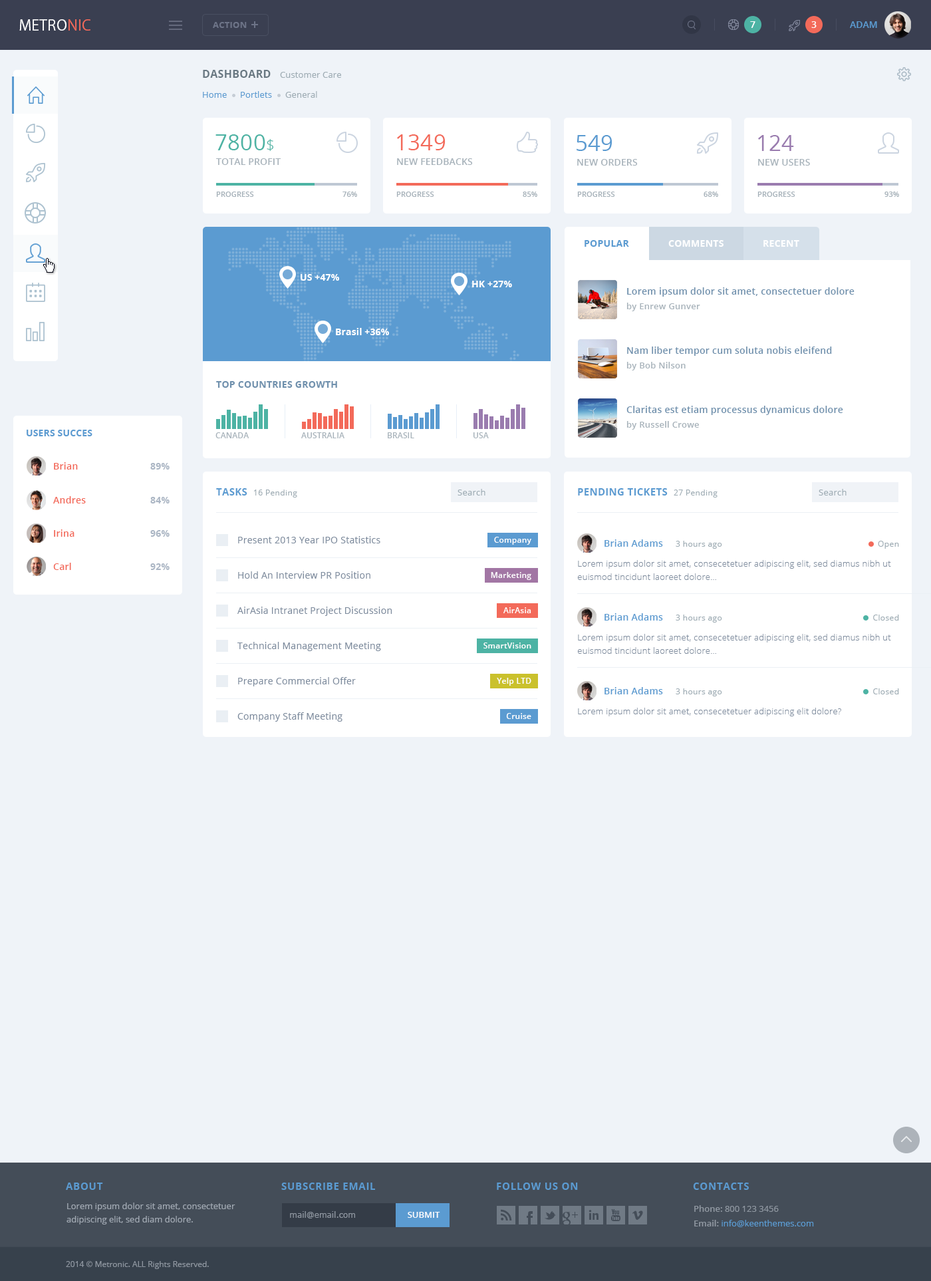
<style>
.page{position:relative;width:931px;height:1281px;background:#eff3f8}
.page>*{position:absolute;margin:0}
.t1{font:14.6px "KozGoPro-Regular";letter-spacing:0.02em;color:#ffffff}
.t2{font:14.6px "KozGoPro-Regular";letter-spacing:0.02em;color:#f36a5a}
.t3{font:8.6px "OpenSans-Bold";letter-spacing:0.02em;color:#6d7488}
.t4{font:9.3px "OpenSans-Semibold";letter-spacing:0.01em;color:#ffffff}
.t5{font:9.3px "OpenSans-Semibold";color:#5b9bd1}
.t6{font:10.6px "OpenSans-Bold";letter-spacing:0.02em;color:#697882}
.t7{font:8.6px "OpenSans";letter-spacing:0.01em;color:#9eacb4}
.t8{font:8.6px "OpenSans";letter-spacing:0.01em;color:#5b9bd1}
.t9{font:21.9px "OpenSans";letter-spacing:0.01em;color:#4db3a4}
.t10{font:15.3px "OpenSans-Light";letter-spacing:0.01em;color:#4db3a4}
.t11{font:21.9px "OpenSans";letter-spacing:0.01em;color:#f36a5a}
.t12{font:21.9px "OpenSans";letter-spacing:0.01em;color:#5b9bd1}
.t13{font:21.9px "OpenSans";letter-spacing:0.01em;color:#9a7caf}
.t14{font:9.3px "OpenSans-Semibold";letter-spacing:0.01em;color:#a8b3bb}
.t15{font:7.3px "OpenSans-Semibold";letter-spacing:0.01em;color:#a8b3bb}
.t16{font:9.3px "OpenSans-Bold";letter-spacing:0.02em;color:#5b9bd1}
.t17{font:9.3px "OpenSans-Bold";letter-spacing:0.02em;color:#ffffff}
.t18{font:9.3px "OpenSans-Bold";letter-spacing:0.01em;color:#ffffff}
.t19{font:9.3px "OpenSans-Semibold";letter-spacing:0.02em;color:#6f90ad}
.t20{font:8.6px "OpenSans-Semibold";letter-spacing:0.02em;color:#a8b3bb}
.t21{font:9.3px "OpenSans-Bold";letter-spacing:0.02em;color:#6f90ad}
.t22{font:9.3px "OpenSans-Bold";letter-spacing:0.01em;color:#5b9bd1}
.t23{font:8px "OpenSans-Semibold";letter-spacing:0.01em;color:#a8b3bb}
.t24{font:9.3px "OpenSans-Semibold";letter-spacing:0.02em;color:#f36a5a}
.t25{font:9.3px "OpenSans-Bold";letter-spacing:0.02em;color:#abb6c4}
.t26{font:10px "OpenSans-Bold";letter-spacing:0.02em;color:#5b9bd1}
.t27{font:8px "OpenSans";letter-spacing:0.03em;color:#9eacb4}
.t28{font:8.6px "OpenSans";letter-spacing:0.02em;color:#9eacb4}
.t29{font:9.3px "OpenSans";letter-spacing:0.02em;color:#7e8c9e}
.t30{font:8px "OpenSans-Semibold";letter-spacing:0.02em;color:#ffffff}
.t31{font:9.3px "OpenSans-Semibold";letter-spacing:0.02em;color:#5b9bd1}
.t32{font:8.6px/13.3px "OpenSans-Light";letter-spacing:0.02em;color:#7e8c9e}
.t33{font:8.6px "OpenSans-Light";letter-spacing:0.02em;color:#7e8c9e}
.t34{font:10px "OpenSans-Bold";letter-spacing:0.05em;color:#5b9bd1}
.t35{font:8.6px/13.3px "OpenSans";color:#a1a9b3}
.t36{font:8.6px/14.6px "OpenSans";color:#5b9bd1}
.t37{font:8.6px/14.6px "OpenSans-Semibold";color:#8f97a1}
.t38{font:8.6px/14.6px "OpenSans";color:#8f97a1}
.t39{font:8px "Verdana";color:#8f97a1}
.t40{font:8.6px "OpenSans-Semibold";color:#fefefe}
.t41{font:8px "OpenSans";color:#8f97a1}
</style>
<div class="page">
<p class="t1" style="left:19px;top:19px;width:71px;height:12px">METRO<span class="t2">NIC</span></p>
<p class="t3" style="left:213px;top:22px;width:34px;height:6px">ACTION</p>
<p class="t4" style="left:750px;top:21px;width:5px;height:7px">7</p>
<p class="t4" style="left:811px;top:21px;width:6px;height:7px">3</p>
<p class="t5" style="left:850px;top:21px;width:27px;height:7px">ADAM</p>
<p class="t6" style="left:203px;top:70px;width:68px;height:8px">DASHBOARD</p>
<p class="t7" style="left:280px;top:72px;width:61px;height:6px">Customer Care</p>
<p class="t8" style="left:203px;top:92px;width:24px;height:6px">Home</p>
<p class="t8" style="left:241px;top:91px;width:31px;height:7px">Portlets</p>
<p class="t7" style="left:285px;top:91px;width:32px;height:7px">General</p>
<p class="t9" style="left:215px;top:134px;width:58px;height:17px">7800<span class="t10">$</span></p>
<p class="t11" style="left:397px;top:134px;width:49px;height:16px">1349</p>
<p class="t12" style="left:577px;top:135px;width:35px;height:16px">549</p>
<p class="t13" style="left:758px;top:135px;width:36px;height:16px">124</p>
<p class="t14" style="left:216px;top:158px;width:65px;height:7px">TOTAL PROFIT</p>
<p class="t14" style="left:397px;top:158px;width:76px;height:7px">NEW FEEDBACKS</p>
<p class="t14" style="left:577px;top:159px;width:61px;height:7px">NEW ORDERS</p>
<p class="t14" style="left:758px;top:159px;width:52px;height:7px">NEW USERS</p>
<p class="t15" style="left:216px;top:192px;width:38px;height:5px">PROGRESS</p>
<p class="t15" style="left:342px;top:192px;width:15px;height:5px">76%</p>
<p class="t15" style="left:396px;top:192px;width:38px;height:5px">PROGRESS</p>
<p class="t15" style="left:523px;top:192px;width:14px;height:5px">85%</p>
<p class="t15" style="left:577px;top:192px;width:38px;height:5px">PROGRESS</p>
<p class="t15" style="left:704px;top:192px;width:14px;height:5px">68%</p>
<p class="t15" style="left:757px;top:192px;width:38px;height:5px">PROGRESS</p>
<p class="t15" style="left:884px;top:192px;width:15px;height:5px">93%</p>
<p class="t16" style="left:585px;top:240px;width:44px;height:7px">POPULAR</p>
<p class="t17" style="left:668px;top:240px;width:56px;height:7px">COMMENTS</p>
<p class="t17" style="left:763px;top:240px;width:36px;height:7px">RECENT</p>
<p class="t18" style="left:301px;top:274px;width:38px;height:7px">US +47%</p>
<p class="t18" style="left:472px;top:281px;width:40px;height:6px">HK +27%</p>
<p class="t19" style="left:627px;top:287px;width:228px;height:10px">Lorem ipsum dolor sit amet, consectetuer dolore</p>
<p class="t20" style="left:626px;top:303px;width:74px;height:8px">by Enrew Gunver</p>
<p class="t18" style="left:336px;top:328px;width:53px;height:7px">Brasil +36%</p>
<p class="t19" style="left:627px;top:346px;width:205px;height:10px">Nam liber tempor cum soluta nobis eleifend</p>
<p class="t20" style="left:626px;top:362px;width:60px;height:8px">by Bob Nilson</p>
<p class="t21" style="left:216px;top:381px;width:121px;height:7px">TOP COUNTRIES GROWTH</p>
<p class="t19" style="left:626px;top:406px;width:217px;height:9px">Claritas est etiam processus dynamicus dolore</p>
<p class="t20" style="left:626px;top:421px;width:73px;height:9px">by Russell Crowe</p>
<p class="t22" style="left:27px;top:430px;width:65px;height:6px">USERS SUCCES</p>
<p class="t23" style="left:215px;top:432px;width:34px;height:6px">CANADA</p>
<p class="t23" style="left:301px;top:432px;width:43px;height:6px">AUSTRALIA</p>
<p class="t23" style="left:388px;top:432px;width:26px;height:6px">BRASIL</p>
<p class="t23" style="left:473px;top:432px;width:16px;height:6px">USA</p>
<p class="t24" style="left:54px;top:462px;width:24px;height:7px">Brian</p>
<p class="t25" style="left:150px;top:463px;width:20px;height:6px">89%</p>
<p class="t24" style="left:53px;top:496px;width:33px;height:7px">Andres</p>
<p class="t25" style="left:150px;top:497px;width:20px;height:6px">84%</p>
<p class="t26" style="left:216px;top:488px;width:31px;height:7px">TASKS</p>
<p class="t27" style="left:254px;top:489px;width:43px;height:8px">16 Pending</p>
<p class="t28" style="left:458px;top:489px;width:27px;height:6px">Search</p>
<p class="t26" style="left:578px;top:488px;width:90px;height:7px">PENDING TICKETS</p>
<p class="t27" style="left:674px;top:489px;width:44px;height:8px">27 Pending</p>
<p class="t28" style="left:819px;top:489px;width:28px;height:6px">Search</p>
<p class="t24" style="left:54px;top:529px;width:20px;height:8px">Irina</p>
<p class="t25" style="left:150px;top:530px;width:20px;height:7px">96%</p>
<p class="t29" style="left:238px;top:536px;width:142px;height:7px">Present 2013 Year IPO Statistics</p>
<p class="t30" style="left:494px;top:537px;width:37px;height:8px">Company</p>
<p class="t31" style="left:604px;top:539px;width:59px;height:8px">Brian Adams</p>
<p class="t27" style="left:676px;top:541px;width:46px;height:8px">3 hours ago</p>
<p class="t27" style="left:878px;top:541px;width:21px;height:8px">Open</p>
<p class="t24" style="left:53px;top:563px;width:18px;height:7px">Carl</p>
<p class="t25" style="left:150px;top:563px;width:20px;height:7px">92%</p>
<p class="t32" style="left:577px;top:560px;width:314px;height:20px">Lorem ipsum dolor sit amet, consecetetuer adipiscing elit, sed diamus nibh ut <br>euismod tincidunt laoreet dolore...</p>
<p class="t29" style="left:238px;top:571px;width:132px;height:8px">Hold An Interview PR Position</p>
<p class="t30" style="left:491px;top:572px;width:40px;height:8px">Marketing</p>
<p class="t29" style="left:237px;top:606px;width:155px;height:10px">AirAsia Intranet Project Discussion</p>
<p class="t30" style="left:503px;top:607px;width:28px;height:6px">AirAsia</p>
<p class="t31" style="left:604px;top:613px;width:59px;height:7px">Brian Adams</p>
<p class="t27" style="left:676px;top:614px;width:46px;height:8px">3 hours ago</p>
<p class="t27" style="left:873px;top:614px;width:26px;height:6px">Closed</p>
<p class="t29" style="left:237px;top:642px;width:144px;height:9px">Technical Management Meeting</p>
<p class="t32" style="left:577px;top:634px;width:314px;height:20px">Lorem ipsum dolor sit amet, consecetetuer adipiscing elit, sed diamus nibh ut <br>euismod tincidunt laoreet dolore...</p>
<p class="t30" style="left:483px;top:642px;width:48px;height:6px">SmartVision</p>
<p class="t29" style="left:238px;top:677px;width:118px;height:9px">Prepare Commercial Offer</p>
<p class="t30" style="left:497px;top:678px;width:34px;height:8px">Yelp LTD</p>
<p class="t31" style="left:604px;top:687px;width:59px;height:7px">Brian Adams</p>
<p class="t27" style="left:676px;top:688px;width:46px;height:8px">3 hours ago</p>
<p class="t27" style="left:873px;top:688px;width:26px;height:6px">Closed</p>
<p class="t29" style="left:237px;top:712px;width:105px;height:10px">Company Staff Meeting</p>
<p class="t30" style="left:506px;top:713px;width:25px;height:6px">Cruise</p>
<p class="t33" style="left:578px;top:708px;width:263px;height:8px">Lorem ipsum dolor sit amet, consecetetuer adipiscing elit dolore?</p>
<p class="t34" style="left:66px;top:1182px;width:37px;height:8px">ABOUT</p>
<p class="t34" style="left:281px;top:1182px;width:94px;height:8px">SUBSCRIBE EMAIL</p>
<p class="t34" style="left:497px;top:1182px;width:81px;height:8px">FOLLOW US ON</p>
<p class="t34" style="left:693px;top:1182px;width:56px;height:8px">CONTACTS</p>
<p class="t35" style="left:67px;top:1202px;width:168px;height:22px">Lorem ipsum dolor sit amet, consectetuer <br>adipiscing elit, sed diam dolore.</p>
<p class="t36" style="left:694px;top:1205px;width:120px;height:22px"><span class="t37">Phone: </span><span class="t38">800 123 3456<br></span><span class="t37">Email: </span>info@keenthemes.com</p>
<p class="t39" style="left:290px;top:1211px;width:65px;height:7px">mail@email.com</p>
<p class="t40" style="left:408px;top:1212px;width:32px;height:6px">SUBMIT</p>
<p class="t41" style="left:66px;top:1261px;width:143px;height:8px">2014 © Metronic. ALL Rights Reserved.</p>
</div>
